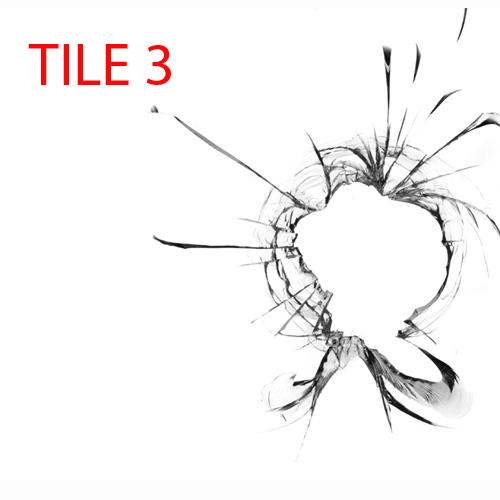
<style>
.page{position:relative;width:500px;height:500px;background:#ffffff}
.page>*{position:absolute;margin:0}
.t1{font:60px "MyriadPro-Regular";color:#fa0707}
</style>
<div class="page">
<p class="t1" style="left:28px;top:44px;width:143px;height:41px">TILE 3</p>
</div>
